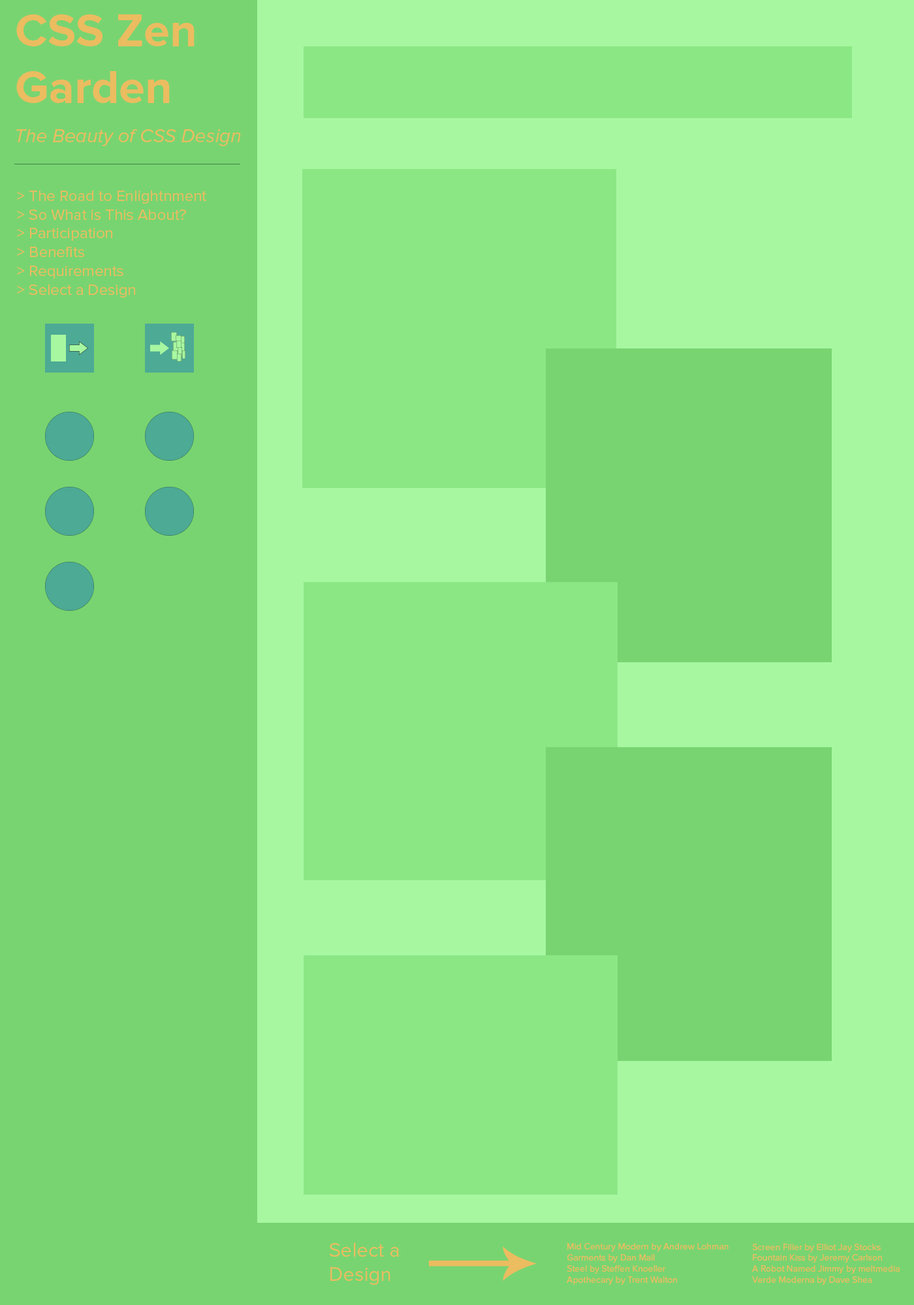
<style>
.page{position:relative;width:914px;height:1305px;background:#78d471}
.page>*{position:absolute;margin:0}
.t1{font:47px "ProximaNova-Bold";color:#ebbc60}
.t2{font:19.6px "ProximaNova-RegularIt";color:#ebbc60}
.t3{font:15.7px "ProximaNova-Regular";color:#ebbc60}
.t4{font:20.4px "ProximaNova-Regular";color:#ebbc60}
.t5{font:9.1px "ProximaNova-Regular";color:#ebbc60}
</style>
<div class="page">
<p class="t1" style="left:16px;top:14px;width:178px;height:89px">CSS Zen<br>Garden</p>
<p class="t2" style="left:16px;top:129px;width:225px;height:17px">The Beauty of CSS Design</p>
<p class="t3" style="left:17px;top:191px;width:189px;height:107px">&gt; The Road to Enlightnment<br>&gt; So What is This About?<br>&gt; Participation<br>&gt; Benefits<br>&gt; Requirements<br>&gt; Select a Design</p>
<p class="t4" style="left:329px;top:1243px;width:70px;height:42px">Select a<br>Design</p>
<p class="t5" style="left:566px;top:1243px;width:162px;height:42px">Mid Century Modern by Andrew Lohman<br>Garments by Dan Mall<br>Steel by Steffen Knoeller<br>Apothecary by Trent Walton</p>
<p class="t5" style="left:752px;top:1244px;width:147px;height:41px">Screen Filler by Elliot Jay Stocks<br>Fountain Kiss by Jeremy Carlson<br>A Robot Named Jimmy by meltmedia<br>Verde Moderna by Dave Shea</p>
</div>
